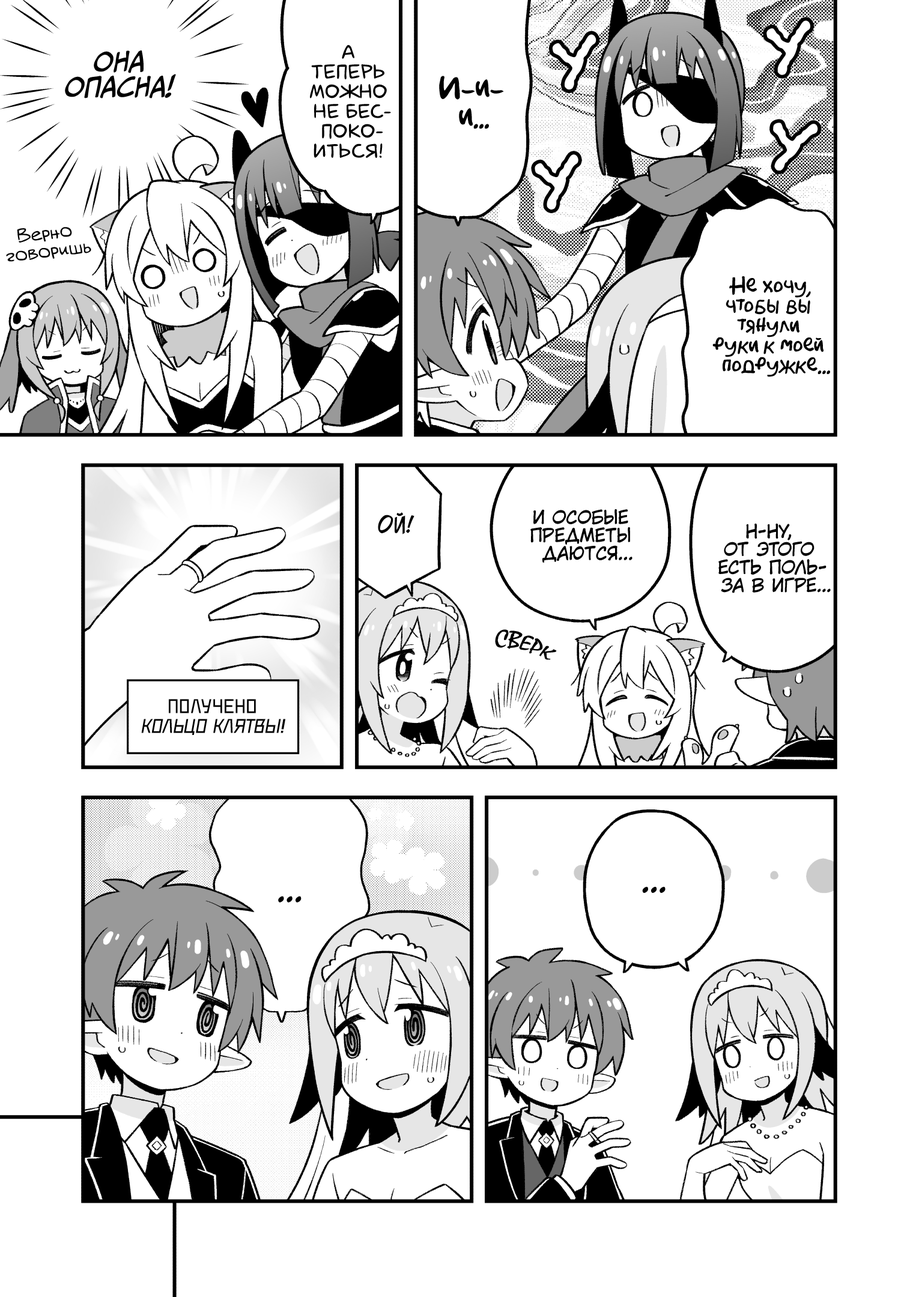
<style>
.page{position:relative;width:919px;height:1297px;background:#ffffff}
.page>*{position:absolute;margin:0}
.t1{font:72.1px "el_CCEvilSchemes";color:#ffffff}
.t2{font:25.2px "CCMeanwhile";color:#000000;text-transform:uppercase;font-style:italic}
.t3{font:19.8px "laCartoonerie";color:#000000;text-transform:uppercase}
.t4{font:28.8px "AkbarPlain";color:#000000}
.t5{font:25.2px "AkbarPlain";color:#000000}
.t6{font:18px "v_Augie";color:#000000}
.t7{font:19.8px "AkbarPlain";color:#000000}
.t8{font:18px "KuraiVoice2";color:#000000;text-transform:uppercase}
.t9{font:21.6px "v_CCJeffCampbell";color:#000000;text-transform:uppercase}
.t10{font:21.6px "MistralC";color:#000000;text-transform:uppercase}
.t11{font:19.8px "DeadMetroC";color:#000000;text-transform:uppercase;font-style:italic}
.t12{font:19.8px "DeadMetroC";color:#000000;text-transform:uppercase}
.t13{font:32.4px "KuraiVoice2";color:#000000;text-transform:uppercase}
</style>
<div class="page">
<p class="t1" style="left:766px;top:20px;width:44px;height:55px;rotate:-4deg">у</p>
<p class="t1" style="left:552px;top:34px;width:44px;height:56px;rotate:-5deg">у</p>
<p class="t2" style="left:65px;top:50px;width:111px;height:49px;text-align:center">Она<br>опасна!</p>
<p class="t3" style="left:310px;top:45px;width:81px;height:113px;text-align:center">А<br>теперь<br>можно<br>не бес-<br>поко-<br>иться!</p>
<p class="t4" style="left:439px;top:76px;width:65px;height:53px;text-align:center">И-и-<br>и<span class="t5">...</span></p>
<p class="t1" style="left:773px;top:123px;width:45px;height:48px;rotate:11deg">у</p>
<p class="t1" style="left:535px;top:154px;width:43px;height:56px;rotate:-5deg">у</p>
<p class="t6" style="left:6px;top:227px;width:85px;height:35px;text-align:center;rotate:-7deg">Верно<br>говоришь</p>
<p class="t7" style="left:712px;top:276px;width:118px;height:101px;text-align:center">Не хочу,<br>чтобы вы<br>тянули<br>руки к моей<br>подружке...</p>
<p class="t8" style="left:530px;top:509px;width:103px;height:54px;text-align:center">И особые<br>предметы<br>даются...</p>
<p class="t9" style="left:378px;top:512px;width:36px;height:23px">Ой!</p>
<p class="t8" style="left:718px;top:524px;width:113px;height:69px;text-align:center">Н-ну,<br>от этого<br>есть поль-<br>за в игре...</p>
<p class="t10" style="left:495px;top:630px;width:62px;height:30px;rotate:17deg">сверк</p>
<p class="t11" style="left:141px;top:699px;width:144px;height:36px;text-align:center"><span class="t12">Получено<br></span>кольцо клятвы!</p>
<p class="t13" style="left:642px;top:887px;width:24px;height:6px">...</p>
<p class="t13" style="left:278px;top:896px;width:24px;height:7px">...</p>
</div>
